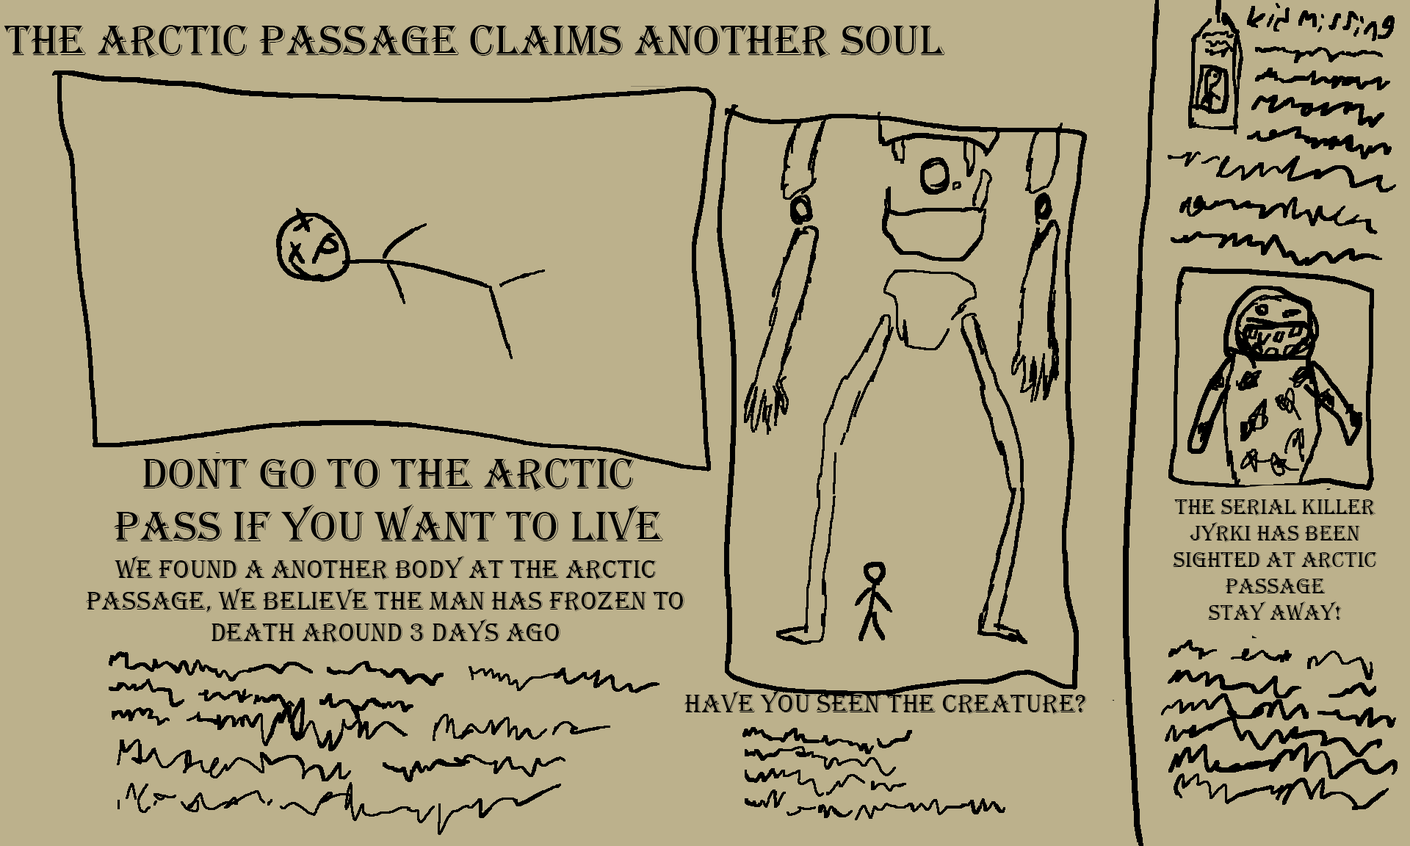
<style>
.page{position:relative;width:1410px;height:846px;background:#bcb18c}
.page>*{position:absolute;margin:0}
.t1{font:44.1px "Algerian";color:#000000}
.t2{font:22px "Algerian";color:#000000}
.t3{font:26.4px "Algerian";color:#000000}
</style>
<div class="page">
<p class="t1" style="left:4px;top:25px;width:941px;height:33px">The arctic passage claims another soul</p>
<p class="t1" style="left:114px;top:458px;width:549px;height:83px;text-align:center">Dont go to the arctic pass if you want to live</p>
<p class="t2" style="left:1173px;top:499px;width:204px;height:121px;text-align:center">the serial killer jyrki has been sighted at arctic passage<br>STAY AWAY!</p>
<p class="t3" style="left:86px;top:555px;width:598px;height:88px;text-align:center">We found a another body at the arctic passage, we believe the man has frozen to death around 3 days ago</p>
<p class="t3" style="left:684px;top:690px;width:403px;height:24px">Have you seen the creature?</p>
</div>
